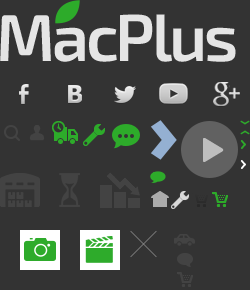
<style>
.page{position:relative;width:250px;height:290px;background:#333333}
.page>*{position:absolute;margin:0}
.t1{font:66.2px "Exo2.0-SemiBold";letter-spacing:-0.05em;color:#e5e5e5}
</style>
<div class="page">
<p class="t1" style="left:0px;top:14px;width:236px;height:48px">MacPlus</p>
</div>
